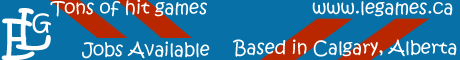
<style>
.page{position:relative;width:460px;height:60px;background:#0670a7}
.page>*{position:absolute;margin:0}
.t1{font:18px "KristenITC-Regular";color:#ffffff}
</style>
<div class="page">
<p class="t1" style="left:50px;top:0px;width:157px;height:17px">Tons of hit games</p>
<p class="t1" style="left:312px;top:1px;width:141px;height:16px">www.legames.ca</p>
<p class="t1" style="left:82px;top:41px;width:128px;height:18px">Jobs Available</p>
<p class="t1" style="left:233px;top:39px;width:224px;height:18px">Based in Calgary, Alberta</p>
</div>
